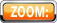
<style>
.page{position:relative;width:57px;height:23px}
.page>*{position:absolute;margin:0}
.t1{font:15.4px "SegoeUI-Bold";letter-spacing:0.025em;color:#ffffff;scale:0.71 1}
</style>
<div class="page">
<p class="t1" style="left:10px;top:6px;width:38px;height:12px">ZOOM:</p>
</div>
